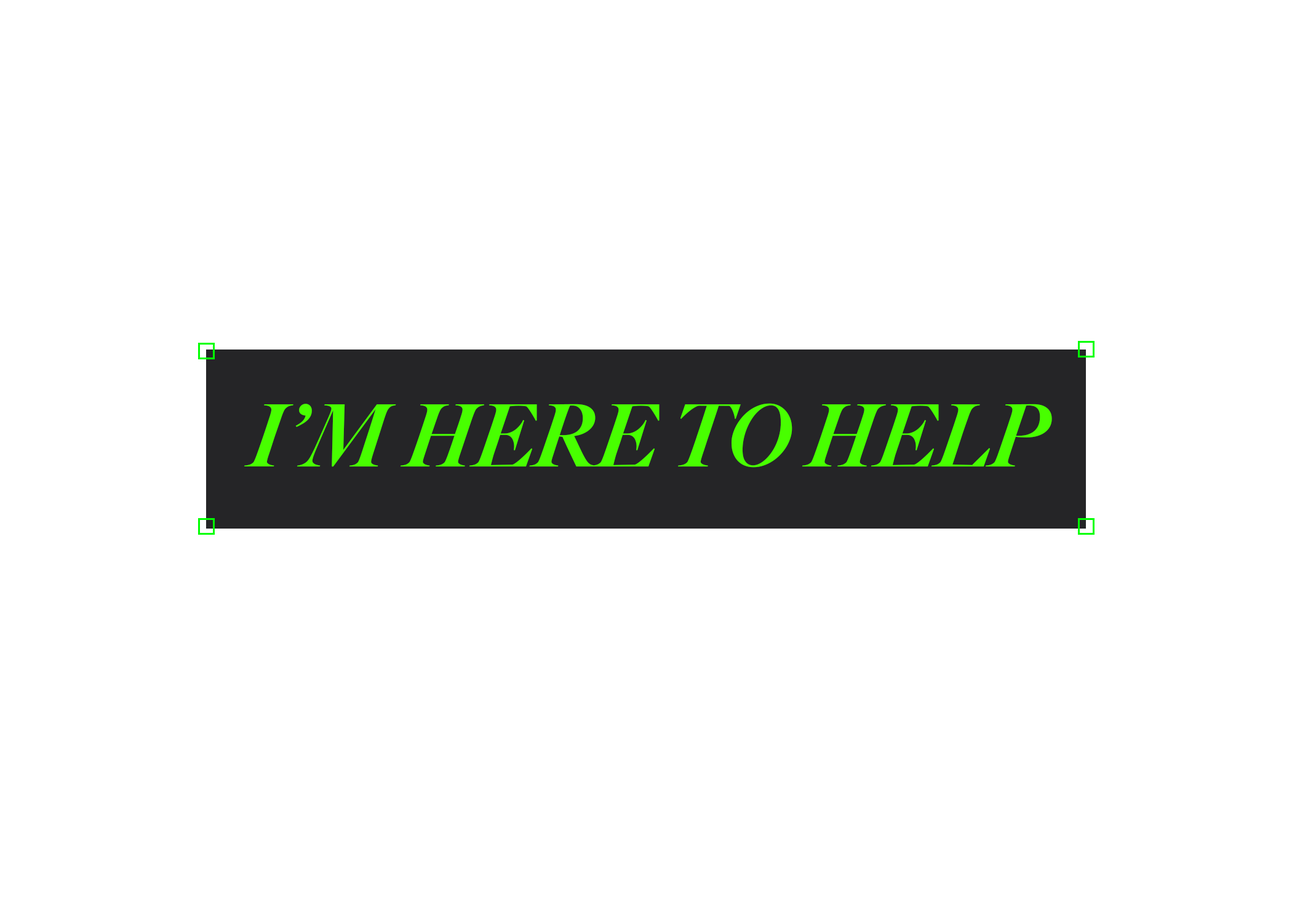
<style>
.page{position:relative;width:1292px;height:923px;background:#ffffff}
.page>*{position:absolute;margin:0}
.t1{font:86px "Big-Caslon-Black-Italic";color:#48ff00}
</style>
<div class="page">
<p class="t1" style="left:244px;top:403px;width:808px;height:65px">I’M HERE TO HELP</p>
</div>
